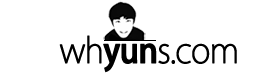
<style>
.page{position:relative;width:270px;height:77px;background:#ffffff}
.page>*{position:absolute;margin:0}
.t1{font:34px "KozGoPr6N-ExtraLight";letter-spacing:-0.04em;color:#000000;font-weight:bold;scale:0.95 1}
.t2{font:34px "KozGoPr6N-Medium";letter-spacing:-0.04em;color:#000000;font-weight:bold;scale:0.95 1}
</style>
<div class="page">
<p class="t1" style="left:59px;top:35px;width:178px;height:38px">wh<span class="t2">yun</span>s.com</p>
</div>
